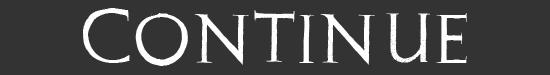
<style>
.page{position:relative;width:550px;height:75px;background:#333333}
.page>*{position:absolute;margin:0}
.t1{font:58.3px "Archeologicaps";color:#ffffff}
</style>
<div class="page">
<p class="t1" style="left:83px;top:8px;width:384px;height:58px">Continue</p>
</div>
